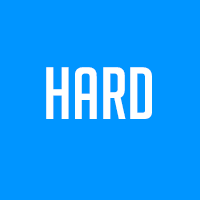
<style>
.page{position:relative;width:200px;height:200px;background:#0095ff}
.page>*{position:absolute;margin:0}
.t1{font:72px "BigNoodleTitling";color:#feffff}
</style>
<div class="page">
<p class="t1" style="left:46px;top:67px;width:106px;height:52px">HARD</p>
</div>
